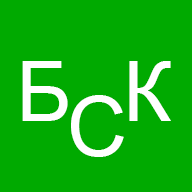
<style>
.page{position:relative;width:192px;height:192px;background:#00aa00}
.page>*{position:absolute;margin:0}
.t1{font:83.3px "ArialMT";color:#ffffff}
</style>
<div class="page">
<p class="t1" style="left:22px;top:61px;width:46px;height:60px">Б</p>
<p class="t1" style="left:129px;top:61px;width:42px;height:60px">К</p>
<p class="t1" style="left:71px;top:95px;width:53px;height:62px">С</p>
</div>
